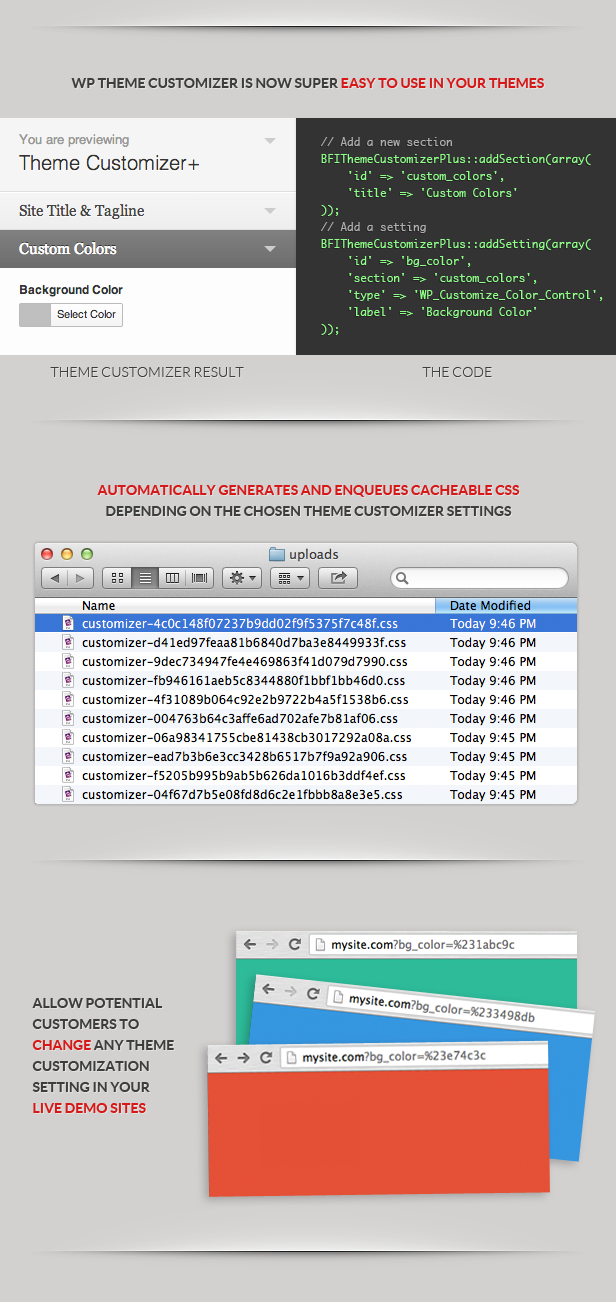
<style>
.page{position:relative;width:616px;height:1302px;background:#d2d1d0}
.page>*{position:absolute;margin:0}
.t1{font:14px "Lato-Bold";color:#3d3d3d}
.t2{font:14px "Lato-Bold";color:#d71818}
.t3{font:11px/17px "Monaco";color:#8fff89}
.t4{font:11px/17px "Monaco";color:#aeaeae}
.t5{font:14px "Lato-Light";color:#3d3d3d}
.t6{font:14px/21px "Lato-Bold";color:#d71818}
.t7{font:14px/21px "Lato-Bold";color:#3d3d3d}
</style>
<div class="page">
<p class="t1" style="left:71px;top:78px;width:473px;height:10px">WP THEME CUSTOMIZER IS NOW SUPER <span class="t2">EASY TO USE IN YOUR THEMES</span></p>
<p class="t3" style="left:320px;top:137px;width:283px;height:198px"><span class="t4">// Add a new section<br></span>BFIThemeCustomizerPlus::addSection(array(<br>    'id' =&gt; 'custom_colors',<br>    'title' =&gt; 'Custom Colors'<br>));<br><span class="t4">// Add a setting<br></span>BFIThemeCustomizerPlus::addSetting(array(<br>    'id' =&gt; 'bg_color',<br>    'section' =&gt; 'custom_colors',<br>    'type' =&gt; 'WP_Customize_Color_Control',<br>    'label' =&gt; 'Background Color'<br>));</p>
<p class="t5" style="left:50px;top:367px;width:194px;height:10px">THEME CUSTOMIZER RESULT</p>
<p class="t5" style="left:422px;top:367px;width:70px;height:10px">THE CODE</p>
<p class="t6" style="left:97px;top:485px;width:423px;height:31px;text-align:center">AUTOMATICALLY GENERATES AND ENQUEUES CACHEABLE CSS<br><span class="t7">DEPENDING ON THE CHOSEN THEME CUSTOMIZER SETTINGS</span></p>
<p class="t7" style="left:32px;top:998px;width:142px;height:115px">ALLOW POTENTIAL <br>CUSTOMERS TO <br><span class="t6">CHANGE </span>ANY THEME <br>CUSTOMIZATION <br>SETTING IN YOUR <br><span class="t6">LIVE DEMO SITES</span></p>
</div>
